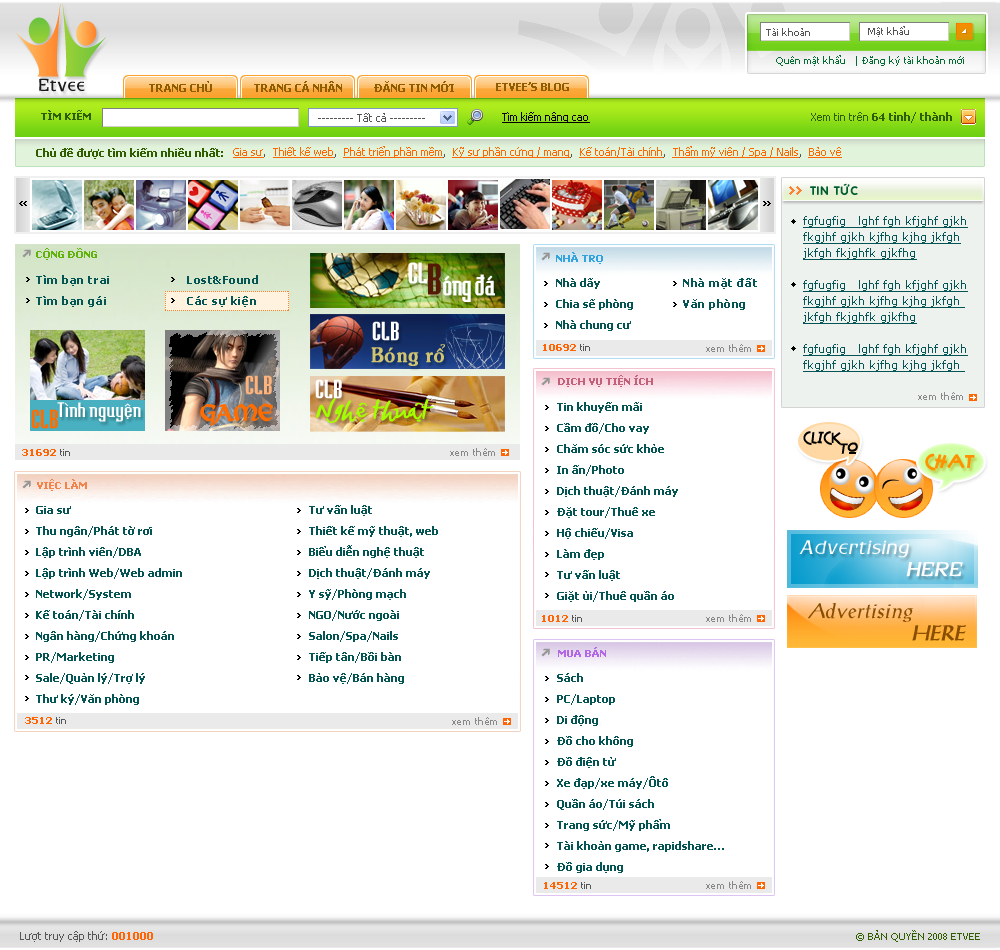
<style>
.page{position:relative;width:1000px;height:950px;background:#ffffff}
.page>*{position:absolute;margin:0}
.t1{font:10px "Tahoma";color:#555555}
.t2{font:10px "Tahoma";color:#046c33}
.t3{font:11px "Tahoma-Bold";color:#8e5d00;text-transform:uppercase}
.t4{font:10px "Tahoma-Bold";color:#305d00}
.t5{font:11px "Tahoma";color:#555555}
.t6{font:11px "Tahoma";color:#000000;text-decoration:underline}
.t7{font:11px "Tahoma-Bold";color:#305d00}
.t8{font:11px "Tahoma";color:#305d00}
.t9{font:11px "Tahoma";color:#ff6600;text-decoration:underline}
.t10{font:12px "VNI-Vari";letter-spacing:0.05em;color:#005d2d;text-transform:uppercase}
.t11{font:11px/16px "Verdana";color:#055555;text-decoration:underline}
.t12{font:10px "Tahoma-Bold";color:#62b20c;text-transform:uppercase}
.t13{font:10px "Tahoma-Bold";color:#31a3df;text-transform:uppercase}
.t14{font:27px/12px "NVTBedrockNormal";letter-spacing:-0.025em;color:#ffffff;font-weight:bold}
.t15{font:40px "NVTBedrockNormal";color:#541a06;font-weight:bold}
.t16{font:11px/21px "Tahoma-Bold";letter-spacing:0.05em;color:#055555}
.t17{font:11px/21px "Tahoma-Bold";color:#055555}
.t18{font:24px "NVTBedrockNormal";color:#ffffff;font-weight:bold}
.t19{font:20px "VNI-Souvir";color:#d1c46e;font-weight:bold}
.t20{font:10px "Tahoma-Bold";color:#ff6603}
.t21{font:24px "NVTBedrockNormal";color:#ffb27a;font-weight:bold}
.t22{font:10px "Tahoma-Bold";color:#c26179;text-transform:uppercase}
.t23{font:22px "VNI-Baybuom-Normal";color:#a2ff00;font-weight:bold}
.t24{font:10px "Tahoma";letter-spacing:0.05em;color:#888888}
.t25{font:24px "NVTBedrockNormal";color:#ff6c00;font-weight:bold}
.t26{font:19.2px "NVTBedrockNormal";color:#ffffff;scale:1.25 1}
.t27{font:23px "VNI-Viking";color:#ff6c00;font-weight:bold}
.t28{font:15px/11px "AmazonRegularSWFTE";color:#000000}
.t29{font:18px "AmazonRegularSWFTE";color:#ff9200;font-weight:bold}
.t30{font:10px "Tahoma-Bold";color:#f1834b;text-transform:uppercase}
.t31{font:18px "Andorra";letter-spacing:0.05em;color:#ffffff;font-style:italic}
.t32{font:18px "Andorra";letter-spacing:0.05em;color:#ffffff;text-transform:uppercase;font-weight:bold;font-style:italic}
.t33{font:20px/22px "AntiquaSSi";letter-spacing:0.05em;color:#894e00;font-style:italic}
.t34{font:20px/22px "AntiquaSSi";letter-spacing:0.05em;color:#894e00;text-transform:uppercase;font-weight:bold;font-style:italic}
.t35{font:10px "Tahoma-Bold";color:#b267e7;text-transform:uppercase}
.t36{font:11px "Tahoma-Bold";color:#ff6603}
.t37{font:10px "Tahoma";color:#305d00;text-transform:uppercase}
</style>
<div class="page">
<p class="t1" style="left:766px;top:28px;width:44px;height:8px">Tài khoản</p>
<p class="t1" style="left:868px;top:26px;width:41px;height:11px">Mật khẩu</p>
<p class="t2" style="left:776px;top:55px;width:188px;height:11px">Quên mật khẩu   | Đăng ký tài khoản mới</p>
<p class="t3" style="left:149px;top:81px;width:63px;height:11px">Trang chủ</p>
<p class="t3" style="left:254px;top:81px;width:88px;height:11px">Trang cá nhân</p>
<p class="t3" style="left:374px;top:81px;width:80px;height:11px">Đăng tin mới</p>
<p class="t3" style="left:496px;top:82px;width:73px;height:9px">Etvee’s blog</p>
<p class="t4" style="left:41px;top:110px;width:50px;height:10px">TÌM KIẾM</p>
<p class="t5" style="left:318px;top:113px;width:107px;height:9px">--------- Tất cả ---------</p>
<p class="t6" style="left:502px;top:112px;width:88px;height:11px">Tìm kiếm nâng cao</p>
<p class="t7" style="left:811px;top:112px;width:141px;height:11px"><span class="t8">Xem tin trên </span>64 tỉnh/ thành</p>
<p class="t7" style="left:36px;top:148px;width:187px;height:11px">Chủ đề được tìm kiếm nhiều nhất:</p>
<p class="t9" style="left:233px;top:146px;width:609px;height:12px">Gia sư<span class="t5">,  </span>Thiết kế web<span class="t5">,  </span>Phát triển phần mềm<span class="t5">,  </span>Kỹ sư phần cứng / mạng<span class="t5">,  </span>Kế toán/Tài chính<span class="t5">,  </span>Thẩm mỹ viện / Spa / Nails<span class="t5">,  </span>Bảo vệ</p>
<p class="t10" style="left:810px;top:183px;width:48px;height:12px">tin töùc</p>
<p class="t11" style="left:803px;top:216px;width:165px;height:156px">fgfugfig   lghf fgh kfjghf gjkh fkgjhf gjkh kjfhg kjhg jkfgh jkfgh fkjghfk gjkfhg<br><br>fgfugfig   lghf fgh kfjghf gjkh fkgjhf gjkh kjfhg kjhg jkfgh  jkfgh fkjghfk gjkfhg<br><br>fgfugfig   lghf fgh kfjghf gjkh fkgjhf gjkh kjfhg kjhg jkfgh</p>
<p class="t12" style="left:36px;top:248px;width:61px;height:12px">Cộng đồng</p>
<p class="t13" style="left:556px;top:252px;width:47px;height:12px">nhà trọ</p>
<p class="t14" style="left:408px;top:262px;width:87px;height:40px">CL<br>          oùng ñaù</p>
<p class="t15" style="left:428px;top:263px;width:13px;height:32px">B</p>
<p class="t16" style="left:36px;top:275px;width:73px;height:32px">Tìm bạn trai<br>Tìm bạn gái</p>
<p class="t16" style="left:187px;top:275px;width:71px;height:32px">Lost&amp;Found<br>Các sự kiện</p>
<p class="t17" style="left:556px;top:278px;width:77px;height:53px">Nhà dãy<br>Chia sẽ phòng<br>Nhà chung cư</p>
<p class="t16" style="left:683px;top:278px;width:74px;height:32px">Nhà mặt đất<br>Văn phòng</p>
<p class="t18" style="left:372px;top:321px;width:27px;height:20px">CLB</p>
<p class="t19" style="left:371px;top:344px;width:74px;height:22px">Boùng roå</p>
<p class="t20" style="left:543px;top:344px;width:47px;height:7px">10692<span class="t1"> tin</span></p>
<p class="t21" style="left:245px;top:375px;width:27px;height:20px">CLB</p>
<p class="t22" style="left:558px;top:375px;width:95px;height:12px">Dịch vụ tiện ích</p>
<p class="t18" style="left:315px;top:379px;width:27px;height:20px">CLB</p>
<p class="t23" style="left:316px;top:398px;width:118px;height:25px">Ngheä thuaät</p>
<p class="t24" style="left:918px;top:392px;width:45px;height:8px">xem thêm</p>
<p class="t25" style="left:31px;top:409px;width:27px;height:20px">CLB</p>
<p class="t26" style="left:57px;top:402px;width:84px;height:20px">Tình nguyeän</p>
<p class="t27" style="left:200px;top:403px;width:73px;height:23px">Game</p>
<p class="t17" style="left:557px;top:402px;width:121px;height:200px">Tin khuyến mãi<br>Cầm đồ/Cho vay<br>Chăm sóc sức khỏe<br>In ấn/Photo<br>Dịch thuật/Đánh máy<br>Đặt tour/Thuê xe<br>Hộ chiếu/Visa<br>Làm đẹp<br>Tư vấn luật<br>Giặt ủi/Thuê quần áo</p>
<p class="t28" style="left:803px;top:431px;width:55px;height:23px">CLICK <br>       TO</p>
<p class="t20" style="left:22px;top:449px;width:48px;height:7px">31692<span class="t1"> tin</span></p>
<p class="t24" style="left:450px;top:448px;width:45px;height:8px">xem thêm</p>
<p class="t29" style="left:925px;top:453px;width:50px;height:18px">CHAT</p>
<p class="t30" style="left:37px;top:479px;width:50px;height:12px">Việc làm</p>
<p class="t17" style="left:36px;top:506px;width:146px;height:199px">Gia sư<br>Thu ngân/Phát tờ rơi<br>Lập trình viên/DBA<br>Lập trình Web/Web admin<br>Network/System<br>Kế toán/Tài chính<br>Ngân hàng/Chứng khoán<br>PR/Marketing<br>Sale/Quản lý/Trợ lý<br>Thư ký/Văn phòng</p>
<p class="t17" style="left:309px;top:505px;width:129px;height:179px">Tư vấn luật<br>Thiết kế mỹ thuật, web<br>Biểu diễn nghệ thuật<br>Dịch thuật/Đánh máy<br>Y sỹ/Phòng mạch<br>NGO/Nước ngoài<br>Salon/Spa/Nails<br>Tiếp tân/Bồi bàn<br>Bảo vệ/Bán hàng</p>
<p class="t31" style="left:799px;top:540px;width:164px;height:37px">Advertising<br>               <span class="t32">here</span></p>
<p class="t33" style="left:807px;top:603px;width:159px;height:38px">Advertising<br>                <span class="t34">here</span></p>
<p class="t20" style="left:542px;top:615px;width:40px;height:7px">1012<span class="t1"> tin</span></p>
<p class="t35" style="left:558px;top:647px;width:48px;height:10px">Mua bán</p>
<p class="t17" style="left:557px;top:673px;width:167px;height:200px">Sách<br>PC/Laptop<br>Di động<br>Đồ cho không<br>Đồ điện tử<br>Xe đạp/xe máy/Ôtô<br>Quần áo/Túi sách<br>Trang sức/Mỹ phẩm<br>Tài khoản game, rapidshare…<br>Đồ gia dụng</p>
<p class="t20" style="left:25px;top:717px;width:41px;height:7px">3512<span class="t1"> tin</span></p>
<p class="t20" style="left:544px;top:882px;width:47px;height:7px">14512<span class="t1"> tin</span></p>
<p class="t5" style="left:20px;top:931px;width:133px;height:11px">Lượt truy cập thứ: <span class="t36">001000</span></p>
<p class="t37" style="left:856px;top:930px;width:124px;height:12px">© Bản quyền 2008 Etvee</p>
</div>
